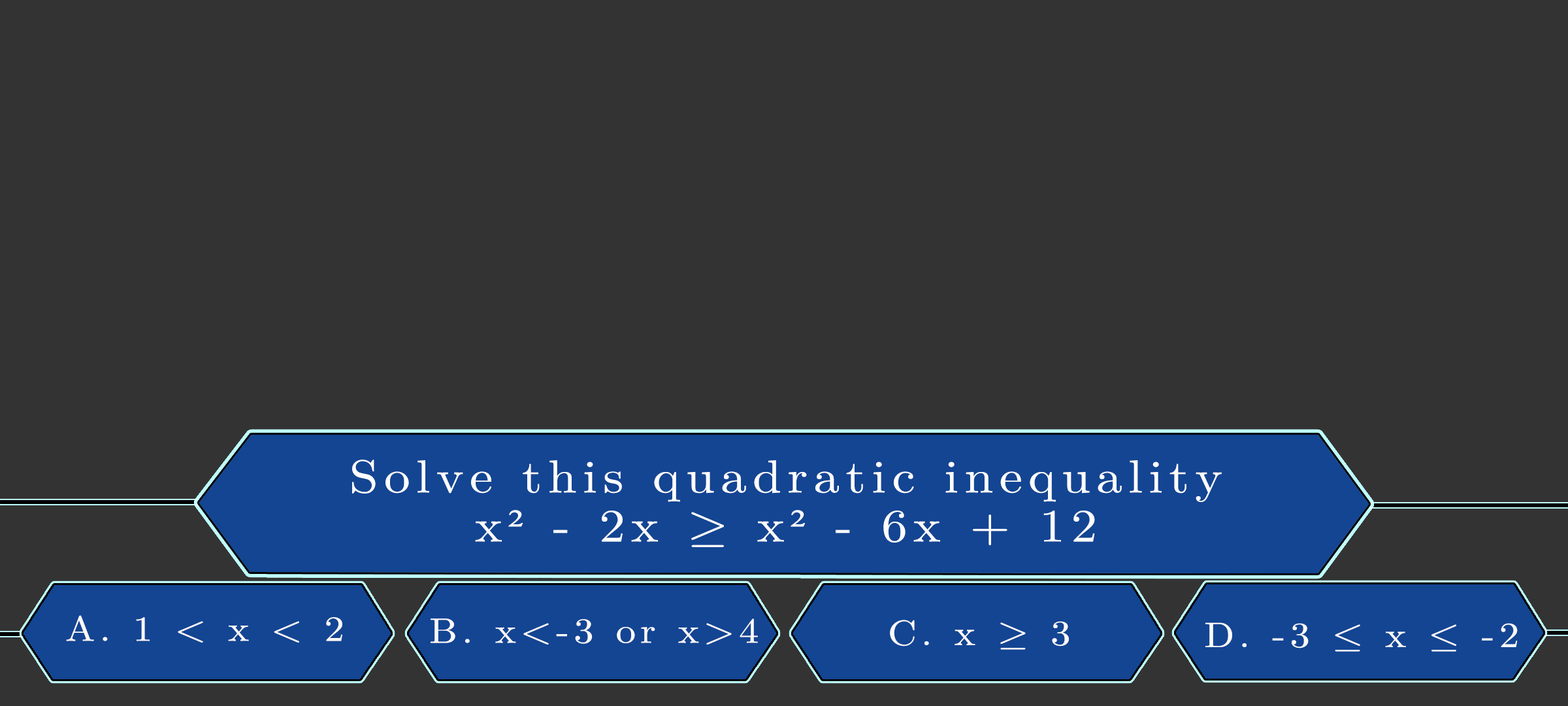
<style>
.page{position:relative;width:1568px;height:706px;background:#333333}
.page>*{position:absolute;margin:0}
.t1{font:46.3px/49px "LatinModernMath-Regular";letter-spacing:0.115em;color:#ffffff;scale:1.12 1}
.t2{font:46.3px/49px "TimesNewRomanPSMT";letter-spacing:0.115em;color:#ffffff;scale:1.12 1}
.t3{font:35.4px "LatinModernMath-Regular";letter-spacing:0.115em;color:#fdfafa;text-transform:uppercase;scale:1.12 1}
.t4{font:35.4px "LatinModernMath-Regular";letter-spacing:0.115em;color:#fdfafa;scale:1.12 1}
.t5{font:35.4px "LatinModernMath-Regular";letter-spacing:0.115em;color:#fcfafa;scale:1.12 1}
.t6{font:35.4px "LatinModernMath-Regular";letter-spacing:0.115em;color:#fcfafa;text-transform:uppercase;scale:1.12 1}
</style>
<div class="page">
<p class="t1" style="left:352px;top:459px;width:870px;height:88px;text-align:center">Solve this quadratic inequality<br>x<span class="t2">²</span> - 2x ≥ x<span class="t2">²</span> - 6x + 12</p>
<p class="t3" style="left:66px;top:615px;width:276px;height:27px">a. 1 &lt; <span class="t4">x</span> &lt; 2</p>
<p class="t5" style="left:431px;top:618px;width:327px;height:26px"><span class="t6">b. </span>x&lt;-3 or x&gt;4</p>
<p class="t4" style="left:890px;top:619px;width:179px;height:30px"><span class="t3">c.</span> x ≥ 3</p>
<p class="t6" style="left:1205px;top:622px;width:313px;height:29px">d. -3 ≤<span class="t5"> x ≤ -2</span></p>
</div>
